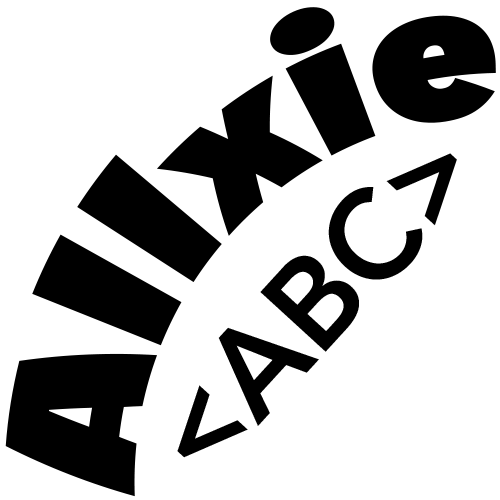
<style>
.page{position:relative;width:500px;height:500px;background:#ffffff}
.page>*{position:absolute;margin:0}
.t1{font:183.3px "AvenirNextCondensed-Heavy";color:#000000}
.t2{font:125px "Avenir-Heavy";color:#000000}
</style>
<div class="page">
<p class="t1" style="left:5px;top:7px;width:491px;height:490px;rotate:-46deg">Allxie</p>
<p class="t2" style="left:177px;top:153px;width:280px;height:305px;rotate:-48deg">&lt;ABC&gt;</p>
</div>
